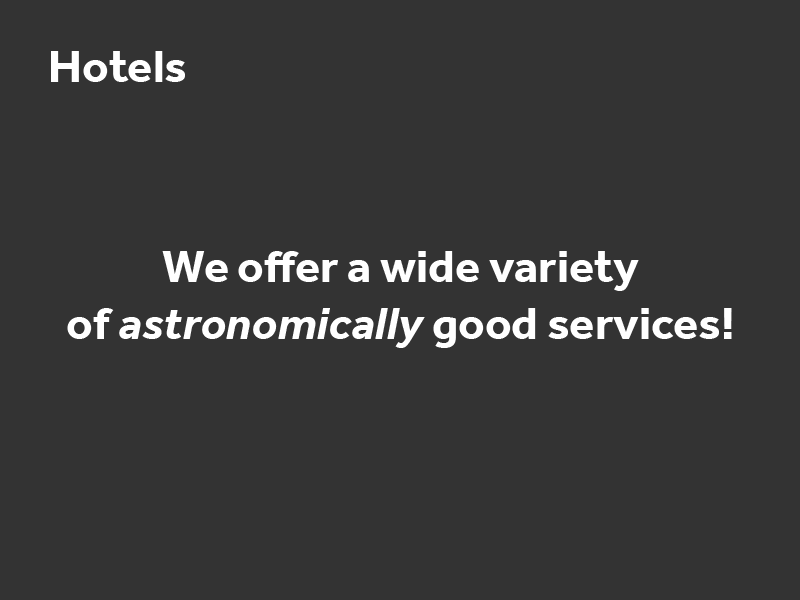
<style>
.page{position:relative;width:800px;height:600px;background:#333333}
.page>*{position:absolute;margin:0}
.t1{font:47.1px "Effra-Bold";color:#ffffff}
.t2{font:47.1px "Effra-BoldItalic";color:#ffffff}
</style>
<div class="page">
<p class="t1" style="left:51px;top:51px;width:134px;height:31px">Hotels</p>
<p class="t1" style="left:67px;top:251px;width:665px;height:97px;text-align:center">We offer a wide variety<br>of <span class="t2">astronomically</span> good services!</p>
</div>
